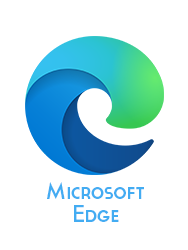
<style>
.page{position:relative;width:188px;height:250px;background:#ffffff}
.page>*{position:absolute;margin:0}
.t1{font:23.8px "Cassannet-Regular";color:#43acf2}
</style>
<div class="page">
<p class="t1" style="left:47px;top:182px;width:97px;height:17px">Microsoft</p>
<p class="t1" style="left:74px;top:205px;width:45px;height:17px">Edge</p>
</div>
